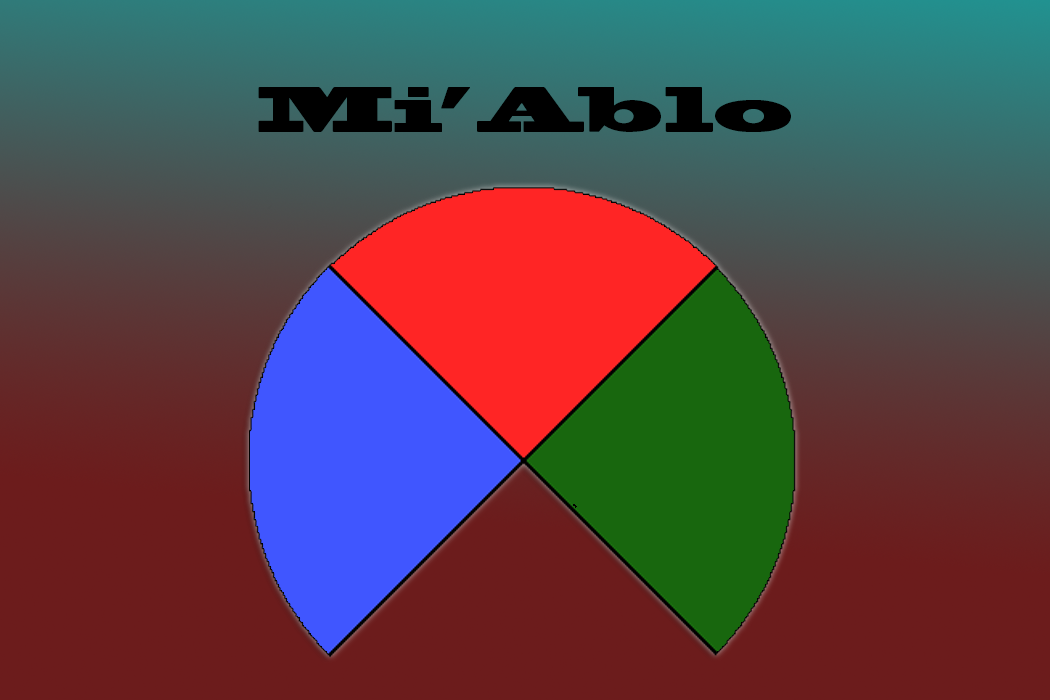
<style>
.page{position:relative;width:1050px;height:700px}
.page>*{position:absolute;margin:0}
.t1{font:60px "BlackoakStd";color:#000000}
</style>
<div class="page">
<p class="t1" style="left:258px;top:87px;width:533px;height:45px">Mi’Ablo</p>
</div>
